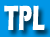
<style>
.page{position:relative;width:50px;height:37px;background:#0096e6}
.page>*{position:absolute;margin:0}
.t1{font:36px "ErasITC-Bold";color:#ffffff;scale:0.61 1}
</style>
<div class="page">
<p class="t1" style="left:4px;top:5px;width:41px;height:26px">TPL</p>
</div>
